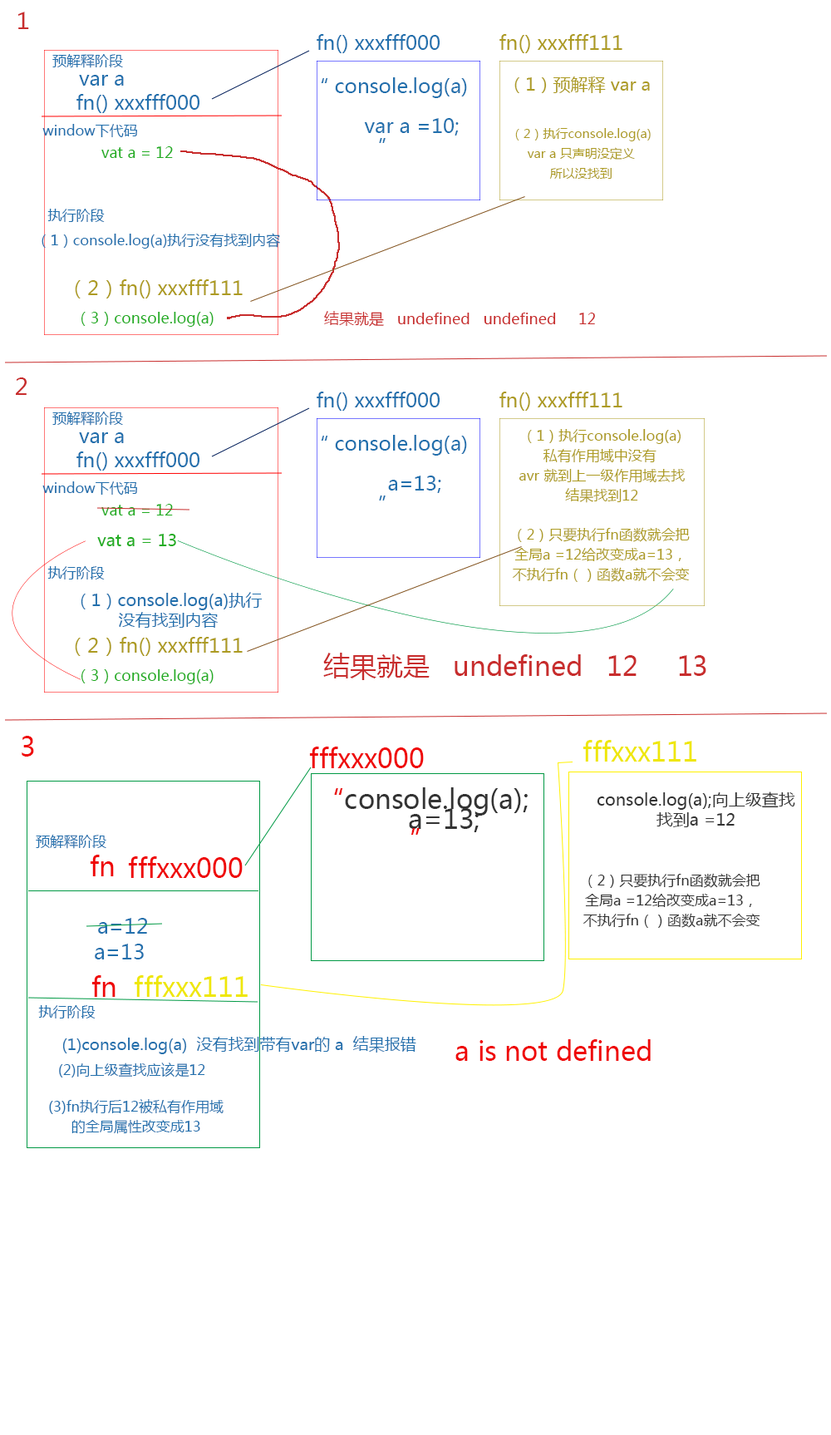
<style>
.page{position:relative;width:831px;height:1435px;background:#ffffff}
.page>*{position:absolute;margin:0}
.t1{font:23.3px "MicrosoftYaHei";color:#c82d2d}
.t2{font:19.9px "MicrosoftYaHei";color:#2270ad}
.t3{font:19.9px "MicrosoftYaHei";color:#ad9b22}
.t4{font:14.1px "MicrosoftYaHei";color:#2270ad}
.t5{font:19.9px/19.9px "MicrosoftYaHei";color:#2270ad}
.t6{font:17.5px "MicrosoftYaHei";color:#ad9b22}
.t7{font:12.5px/19.9px "MicrosoftYaHei";color:#ad9b22}
.t8{font:15px "MicrosoftYaHei";color:#22ad22}
.t9{font:15px "MicrosoftYaHei";color:#c82d2d}
.t10{font:14.1px/19.9px "MicrosoftYaHei";color:#ad9b22}
.t11{font:16.6px "MicrosoftYaHei";color:#22ad22}
.t12{font:16.6px/19.9px "MicrosoftYaHei";color:#2270ad}
.t13{font:26.6px "MicrosoftYaHei";color:#c82d2d}
.t14{font:26.6px "MicrosoftYaHei";color:#ef0808}
.t15{font:26.6px "MicrosoftYaHei";color:#efe708}
.t16{font:26.6px/19.9px "MicrosoftYaHei";color:#333333}
.t17{font:26.6px/19.9px "MicrosoftYaHei";color:#ea0b0b}
.t18{font:26.6px/19.9px "MicrosoftYaHei";color:#ef0808}
.t19{font:16.6px/19.9px "MicrosoftYaHei";color:#333333}
.t20{font:14.1px/19.9px "MicrosoftYaHei";color:#333333}
.t21{font:20.8px "MicrosoftYaHei";color:#2270ad}
.t22{font:15.8px "MicrosoftYaHei";color:#2270ad}
.t23{font:14.1px/19.9px "MicrosoftYaHei";color:#2270ad}
</style>
<div class="page">
<p class="t1" style="left:18px;top:12px;width:11px;height:17px">1</p>
<p class="t2" style="left:317px;top:34px;width:123px;height:19px">fn() xxxfff000</p>
<p class="t3" style="left:500px;top:34px;width:123px;height:19px">fn() xxxfff111</p>
<p class="t4" style="left:52px;top:54px;width:71px;height:14px">预解释阶段</p>
<p class="t2" style="left:79px;top:75px;width:45px;height:11px">var a</p>
<p class="t5" style="left:321px;top:77px;width:146px;height:66px;text-align:center">“ console.log(a)<br><br>        var a =10;<br>”</p>
<p class="t6" style="left:515px;top:76px;width:135px;height:17px">（1）预解释 var a</p>
<p class="t2" style="left:76px;top:94px;width:123px;height:19px">fn() xxxfff000</p>
<p class="t4" style="left:42px;top:124px;width:95px;height:13px">window下代码</p>
<p class="t7" style="left:515px;top:128px;width:136px;height:51px;text-align:center">（2）执行console.log(a)<br>var a 只声明没定义<br>所以没找到</p>
<p class="t8" style="left:101px;top:146px;width:72px;height:12px">vat a = 12</p>
<p class="t4" style="left:47px;top:209px;width:58px;height:13px">执行阶段</p>
<p class="t4" style="left:42px;top:233px;width:238px;height:16px">（1）console.log(a)执行没有找到内容</p>
<p class="t3" style="left:75px;top:279px;width:168px;height:19px">（2）fn() xxxfff111</p>
<p class="t8" style="left:81px;top:312px;width:133px;height:15px">（3）console.log(a)</p>
<p class="t9" style="left:324px;top:311px;width:271px;height:16px">结果就是   undefined   undefined     12</p>
<p class="t1" style="left:16px;top:377px;width:11px;height:18px">2</p>
<p class="t2" style="left:317px;top:391px;width:123px;height:20px">fn() xxxfff000</p>
<p class="t3" style="left:500px;top:391px;width:123px;height:20px">fn() xxxfff111</p>
<p class="t4" style="left:52px;top:411px;width:71px;height:15px">预解释阶段</p>
<p class="t2" style="left:79px;top:432px;width:45px;height:11px">var a</p>
<p class="t5" style="left:321px;top:435px;width:146px;height:65px;text-align:center">“ console.log(a)<br><br>         a=13;<br>”</p>
<p class="t10" style="left:519px;top:429px;width:166px;height:74px;text-align:center">（1）执行console.log(a)<br>私有作用域中没有 <br>avr 就到上一级作用域去找<br>结果找到12</p>
<p class="t2" style="left:76px;top:451px;width:123px;height:19px">fn() xxxfff000</p>
<p class="t4" style="left:42px;top:481px;width:95px;height:14px">window下代码</p>
<p class="t8" style="left:101px;top:504px;width:72px;height:11px">vat a = 12</p>
<p class="t11" style="left:97px;top:534px;width:79px;height:12px">vat a = 13</p>
<p class="t10" style="left:512px;top:527px;width:178px;height:55px;text-align:center">（2）只要执行fn函数就会把<br>全局a =12给改变成a=13，<br>不执行fn（）函数a就不会变</p>
<p class="t4" style="left:47px;top:566px;width:58px;height:13px">执行阶段</p>
<p class="t12" style="left:81px;top:592px;width:182px;height:36px;text-align:center">（1）console.log(a)执行<br>没有找到内容</p>
<p class="t3" style="left:75px;top:637px;width:168px;height:19px">（2）fn() xxxfff111</p>
<p class="t13" style="left:323px;top:652px;width:384px;height:28px">结果就是   undefined   12     13</p>
<p class="t8" style="left:81px;top:669px;width:133px;height:15px">（3）console.log(a)</p>
<p class="t14" style="left:22px;top:736px;width:12px;height:20px">3</p>
<p class="t14" style="left:309px;top:746px;width:115px;height:22px">fffxxx000</p>
<p class="t15" style="left:583px;top:740px;width:114px;height:21px">fffxxx111</p>
<p class="t16" style="left:334px;top:787px;width:194px;height:48px;text-align:center"><span class="t17">“</span>console.log(a);<br>  a=13;<span class="t18"> <br>”</span></p>
<p class="t19" style="left:597px;top:791px;width:198px;height:36px;text-align:center">console.log(a);向上级查找<br>找到a =12</p>
<p class="t4" style="left:36px;top:835px;width:70px;height:14px">预解释阶段</p>
<p class="t14" style="left:90px;top:854px;width:24px;height:22px">fn</p>
<p class="t14" style="left:128px;top:856px;width:115px;height:22px">fffxxx000</p>
<p class="t20" style="left:583px;top:873px;width:178px;height:55px;text-align:center">（2）只要执行fn函数就会把<br>全局a =12给改变成a=13，<br>不执行fn（）函数a就不会变</p>
<p class="t21" style="left:98px;top:918px;width:49px;height:15px">a=12</p>
<p class="t21" style="left:95px;top:943px;width:49px;height:16px">a=13</p>
<p class="t14" style="left:91px;top:975px;width:25px;height:22px">fn</p>
<p class="t15" style="left:134px;top:975px;width:114px;height:22px">fffxxx111</p>
<p class="t4" style="left:38px;top:1005px;width:58px;height:13px">执行阶段</p>
<p class="t22" style="left:62px;top:1036px;width:354px;height:18px">(1)console.log(a)  没有找到带有var的 a  结果报错</p>
<p class="t14" style="left:455px;top:1039px;width:196px;height:22px">a is not defined</p>
<p class="t4" style="left:59px;top:1062px;width:146px;height:15px">(2)向上级查找应该是12</p>
<p class="t23" style="left:49px;top:1099px;width:175px;height:35px;text-align:center">(3)fn执行后12被私有作用域<br>的全局属性改变成13</p>
</div>
